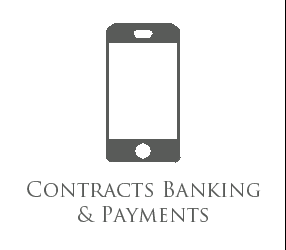
<style>
.page{position:relative;width:286px;height:250px;background:#ffffff}
.page>*{position:absolute;margin:0}
.t1{font:20.8px "TrajanPro-Regular";color:#595b59}
</style>
<div class="page">
<p class="t1" style="left:27px;top:181px;width:234px;height:41px;text-align:center">Contracts Banking<br>&amp; Payments</p>
</div>
